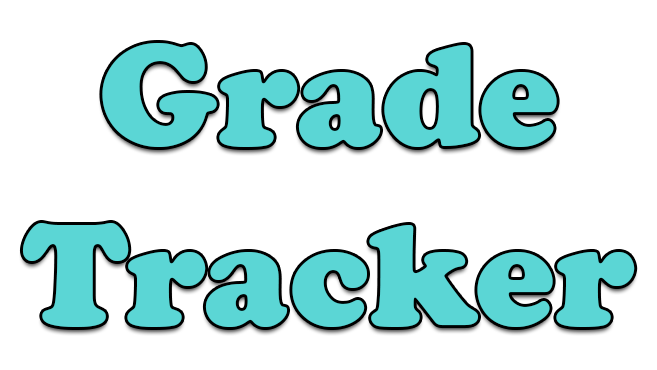
<style>
.page{position:relative;width:657px;height:370px;background:#ffffff}
.page>*{position:absolute;margin:0}
.t1{font:150px "CooperBlack";color:#5bd6d5}
.t2{font:150px "BradleyHandITC";color:#5bd6d5}
</style>
<div class="page">
<p class="t1" style="left:22px;top:43px;width:613px;height:284px"><span class="t2"> </span> Grade<br>Tracker</p>
</div>
